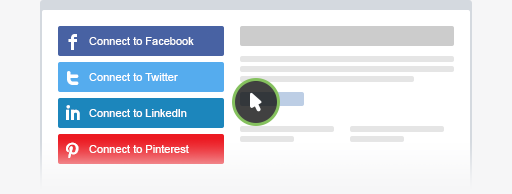
<style>
.page{position:relative;width:512px;height:194px;background:#ffffff}
.page>*{position:absolute;margin:0}
.t1{font:26px "Socialico";color:#ffffff}
.t2{font:11px "ArialMT";color:#ffffff}
.t3{font:26px "SocialicoPlus";color:#ffffff}
</style>
<div class="page">
<p class="t1" style="left:68px;top:34px;width:9px;height:16px">F</p>
<p class="t2" style="left:89px;top:37px;width:105px;height:8px">Connect to Facebook</p>
<p class="t1" style="left:67px;top:71px;width:12px;height:14px">T</p>
<p class="t2" style="left:89px;top:73px;width:89px;height:8px">Connect to Twitter</p>
<p class="t1" style="left:66px;top:105px;width:14px;height:15px">I</p>
<p class="t2" style="left:89px;top:109px;width:98px;height:8px">Connect to LinkedIn</p>
<p class="t3" style="left:66px;top:142px;width:13px;height:16px">P</p>
<p class="t2" style="left:89px;top:145px;width:100px;height:8px">Connect to Pinterest</p>
</div>
